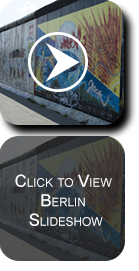
<style>
.page{position:relative;width:139px;height:271px}
.page>*{position:absolute;margin:0}
.t1{font:16.7px/19.4px "ArialMT";color:#ffffff;font-variant:small-caps}
</style>
<div class="page">
<p class="t1" style="left:15px;top:174px;width:97px;height:52px;text-align:center">Click to View Berlin<br> Slideshow</p>
</div>
